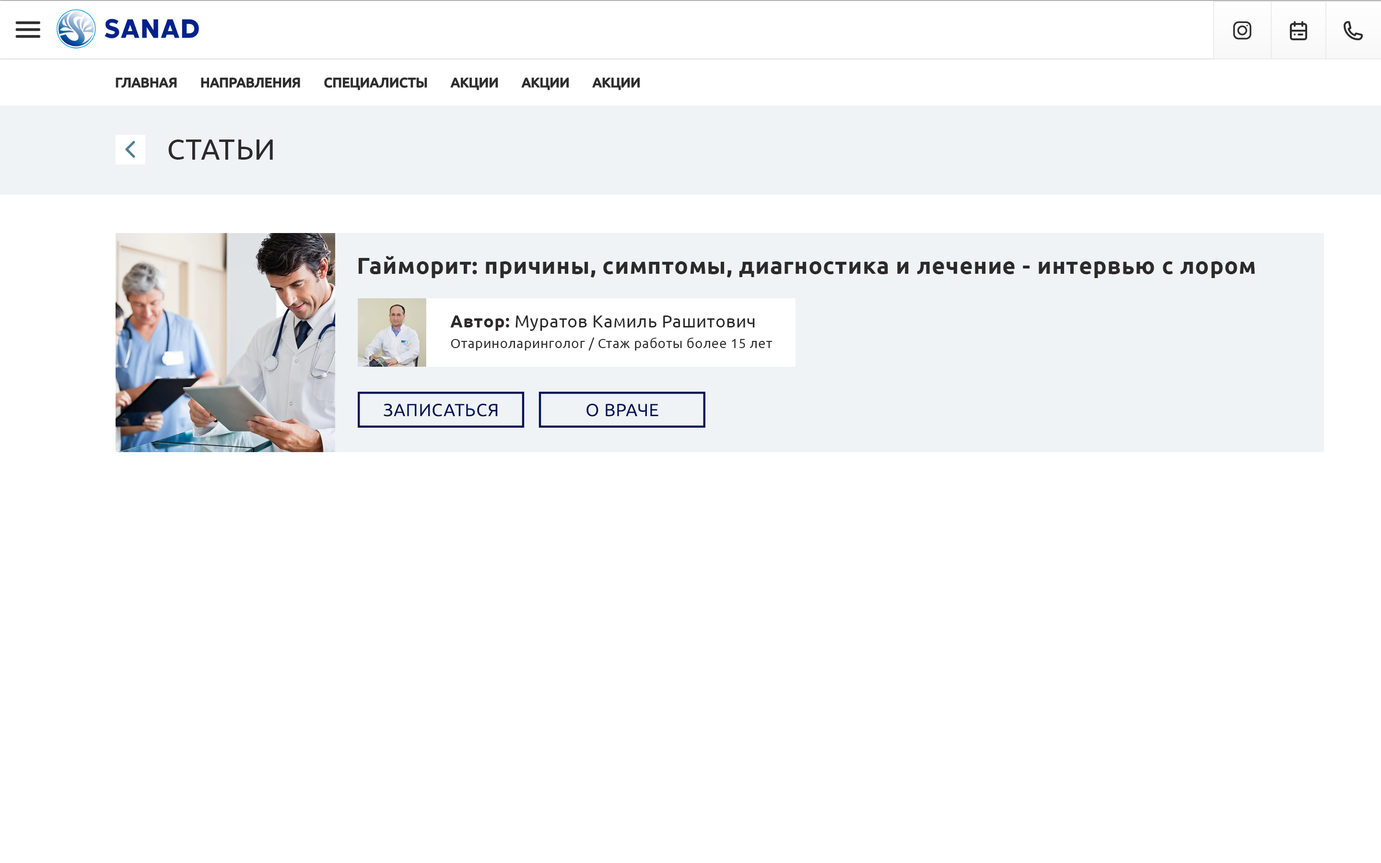
<style>
.page{position:relative;width:1381px;height:863px;background:#ffffff}
.page>*{position:absolute;margin:0}
.t1{font:28.8px "Ubuntu";letter-spacing:0.025em;color:#2c2a2a;text-transform:uppercase}
.t2{font:23px "Ubuntu-Bold";letter-spacing:0.025em;color:#2c2a2a}
.t3{font:17.3px "Ubuntu";letter-spacing:0.025em;color:#2c2a2a}
.t4{font:17.3px "Ubuntu-Bold";letter-spacing:0.025em;color:#2c2a2a}
.t5{font:13.4px "Ubuntu";letter-spacing:0.025em;color:#2c2a2a}
.t6{font:17.6px "Ubuntu";letter-spacing:0.025em;color:#001259;text-transform:uppercase}
</style>
<div class="page">
<p class="t1" style="left:168px;top:140px;width:105px;height:20px">Статьи</p>
<p class="t2" style="left:358px;top:256px;width:897px;height:22px">Гайморит: причины, симптомы, диагностика и лечение - интервью с лором</p>
<p class="t3" style="left:450px;top:316px;width:305px;height:15px"><span class="t4">Автор: </span>Муратов Камиль Рашитович</p>
<p class="t5" style="left:451px;top:338px;width:321px;height:13px">Отариноларинголог / Стаж работы более 15 лет</p>
<p class="t6" style="left:384px;top:404px;width:114px;height:13px">Записаться</p>
<p class="t6" style="left:587px;top:404px;width:71px;height:13px">О враче</p>
</div>
